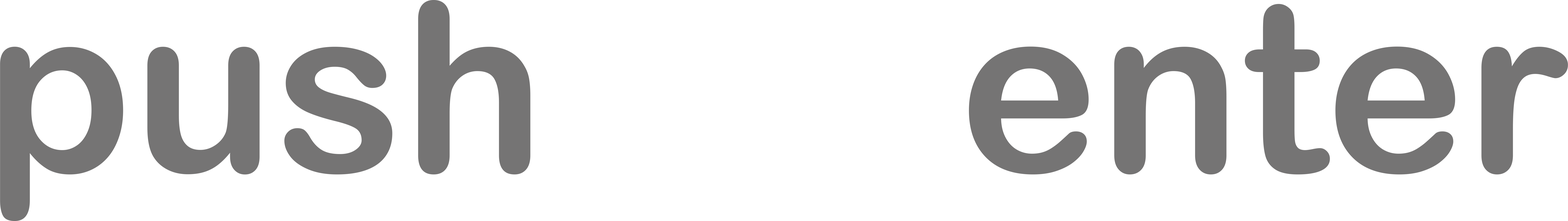
<style>
.page{position:relative;width:1568px;height:221px;background:#ffffff}
.page>*{position:absolute;margin:0}
.t1{font:236.1px "ArialRoundedMTBold";color:#757474}
</style>
<div class="page">
<p class="t1" style="left:0px;top:0px;width:1568px;height:221px">push       enter</p>
</div>
